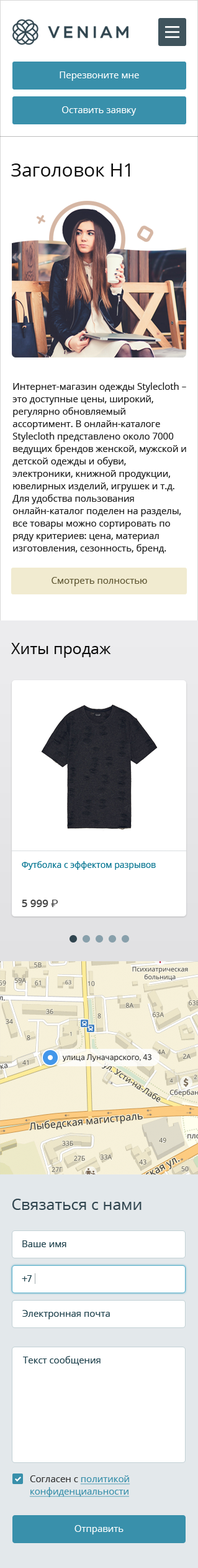
<style>
.page{position:relative;width:198px;height:1568px;background:#ffffff}
.page>*{position:absolute;margin:0}
.t1{font:9.3px "OpenSans-Regular";color:#ffffff}
.t2{font:18.7px "OpenSans-Regular";color:#0d0d0d}
.t3{font:9.3px/12.4px "OpenSans-Regular";color:#1d1d1d}
.t4{font:9.3px "OpenSans-Regular";color:#5f5733}
.t5{font:15.5px "OpenSans-Regular";color:#0d0d0d}
.t6{font:8.7px "OpenSans-Regular";color:#007390}
.t7{font:10.6px "OpenSans-SemiBold";color:#474747}
.t8{font:10.6px "Roboto-Regular";color:#474747}
.t9{font:15.5px "OpenSans-Regular";color:#30454f}
.t10{font:9.3px "OpenSans-Regular";color:#1e414c}
.t11{font:9.3px "Rubik-Regular";color:#1e414c}
.t12{font:9.3px/12.4px "OpenSans-Regular";color:#3990ab;text-decoration:underline}
.t13{font:9.3px/12.4px "OpenSans-Regular";color:#333333}
</style>
<div class="page">
<p class="t1" style="left:60px;top:71px;width:79px;height:10px">Перезвоните мне</p>
<p class="t1" style="left:62px;top:106px;width:75px;height:10px">Оставить заявку</p>
<p class="t2" style="left:11px;top:164px;width:119px;height:13px">Заголовок Н1</p>
<p class="t3" style="left:12px;top:382px;width:175px;height:172px">Интернет-магазин одежды Stylecloth – это доступные цены, широкий, регулярно обновляемый ассортимент. В онлайн-каталоге Stylecloth представлено около 7000 ведущих брендов женской, мужской и детской одежды и обуви, электроники, книжной продукции, ювелирных изделий, игрушек и т.д. Для удобства пользования онлайн-каталог поделен на разделы, все товары можно сортировать по ряду критериев: цена, материал изготовления, сезонность, бренд.</p>
<p class="t4" style="left:52px;top:577px;width:95px;height:9px">Смотреть полностью</p>
<p class="t5" style="left:11px;top:643px;width:100px;height:15px">Хиты продаж</p>
<p class="t6" style="left:22px;top:861px;width:134px;height:9px">Футболка с эффектом разрывов</p>
<p class="t7" style="left:22px;top:900px;width:36px;height:7px">5 999 <span class="t8">₽</span></p>
<p class="t9" style="left:12px;top:1199px;width:130px;height:11px">Связаться с нами</p>
<p class="t10" style="left:22px;top:1240px;width:45px;height:7px">Ваше имя</p>
<p class="t11" style="left:22px;top:1275px;width:10px;height:7px">+7</p>
<p class="t10" style="left:22px;top:1310px;width:88px;height:9px">Электронная почта</p>
<p class="t10" style="left:23px;top:1356px;width:78px;height:9px">Текст сообщения</p>
<p class="t12" style="left:29px;top:1475px;width:102px;height:22px"><span class="t13">Согласен с </span>политикой<br>конфиденциальности</p>
<p class="t1" style="left:75px;top:1525px;width:49px;height:9px">Отправить</p>
</div>
